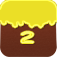
<style>
.page{position:relative;width:57px;height:57px;background:#ebdf26}
.page>*{position:absolute;margin:0}
.t1{font:15.3px "ComicSansMS-Bold";scale:1.67 1}
</style>
<div class="page">
<p class="t1" style="left:21px;top:31px;width:13px;height:12px">2</p>
</div>
